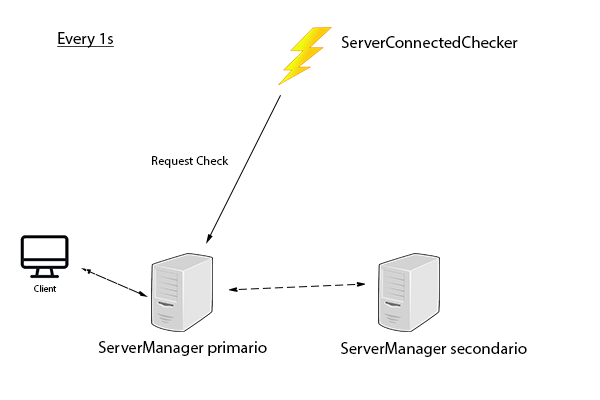
<style>
.page{position:relative;width:600px;height:400px;background:#ffffff}
.page>*{position:absolute;margin:0}
.t1{font:16.7px "MyriadPro-Regular";color:#000000;text-decoration:underline}
.t2{font:16.7px "MyriadPro-Regular";color:#000000}
.t3{font:12.5px "MyriadPro-Regular";color:#000000}
.t4{font:9.1px "MyriadPro-Regular";color:#000000}
</style>
<div class="page">
<p class="t1" style="left:57px;top:32px;width:57px;height:16px">Every 1s</p>
<p class="t2" style="left:341px;top:36px;width:177px;height:12px">ServerConnectedChecker</p>
<p class="t3" style="left:152px;top:156px;width:77px;height:12px">Request Check</p>
<p class="t4" style="left:34px;top:285px;width:23px;height:7px">Client</p>
<p class="t2" style="left:98px;top:341px;width:169px;height:15px">ServerManager primario</p>
<p class="t2" style="left:341px;top:342px;width:186px;height:15px">ServerManager secondario</p>
</div>
